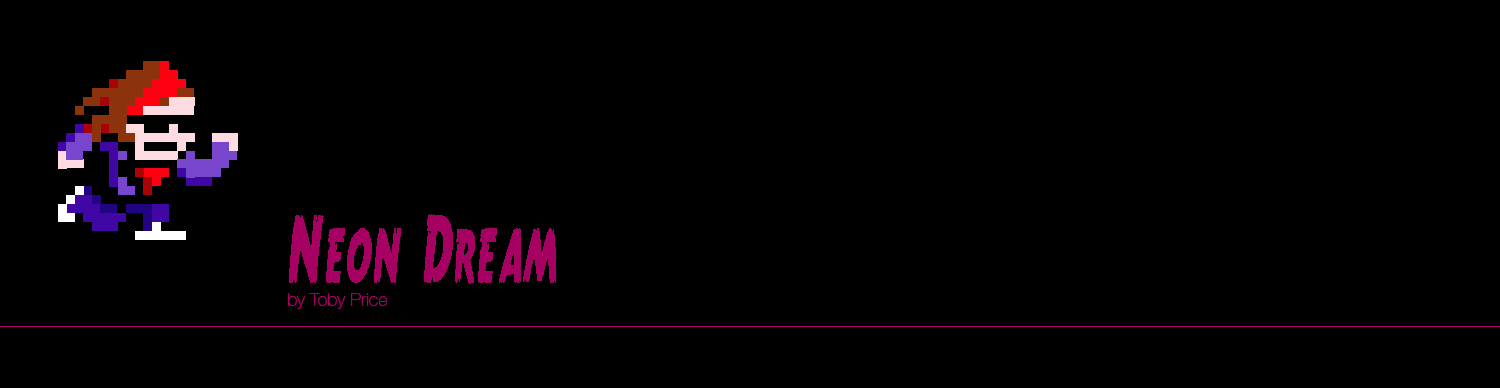
<style>
.page{position:relative;width:1500px;height:388px;background:#000000}
.page>*{position:absolute;margin:0}
.t1{font:97.9px "TrueCrimes";color:#a60062;scale:0.54 1}
.t2{font:18px "HelveticaNeue-Thin";color:#a60062}
</style>
<div class="page">
<p class="t1" style="left:289px;top:214px;width:267px;height:70px">Neon Dream</p>
<p class="t2" style="left:288px;top:293px;width:100px;height:16px">by Toby Price</p>
</div>
